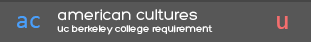
<style>
.page{position:relative;width:311px;height:42px;background:#575757}
.page>*{position:absolute;margin:0}
.t1{font:24px "Consolas";color:#499ffa}
.t2{font:10px "Hero";color:#ffffff}
.t3{font:16px "Hero";color:#ffffff}
.t4{font:24px "Menlo-Regular";color:#f46e6e}
</style>
<div class="page">
<p class="t1" style="left:17px;top:16px;width:23px;height:12px">ac</p>
<p class="t2" style="left:57px;top:9px;width:156px;height:26px"><span class="t3">american cultures<br></span>uc berkeley college requirement</p>
<p class="t4" style="left:277px;top:16px;width:11px;height:13px">u</p>
</div>
